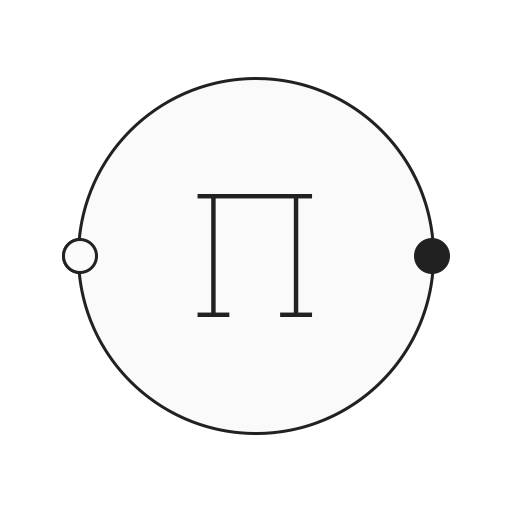
<style>
.page{position:relative;width:512px;height:512px;background:#ffffff}
.page>*{position:absolute;margin:0}
.t1{font:172px "RobotoSlab-Thin";color:#212121}
</style>
<div class="page">
<p class="t1" style="left:197px;top:194px;width:116px;height:123px">П</p>
</div>
